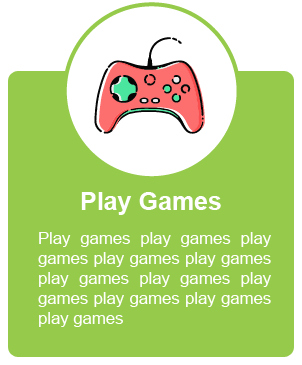
<style>
.page{position:relative;width:302px;height:365px;background:#96ca4a}
.page>*{position:absolute;margin:0}
.t1{font:25px "Arial-BoldMT";color:#ffffff}
.t2{font:16.7px "ArialMT";color:#ffffff}
</style>
<div class="page">
<p class="t1" style="left:81px;top:192px;width:140px;height:23px">Play Games</p>
<p class="t2" style="left:38px;top:232px;width:233px;height:95px;text-align:justify">Play games play games play games play games play games play games play games play games play games play games play games</p>
</div>
